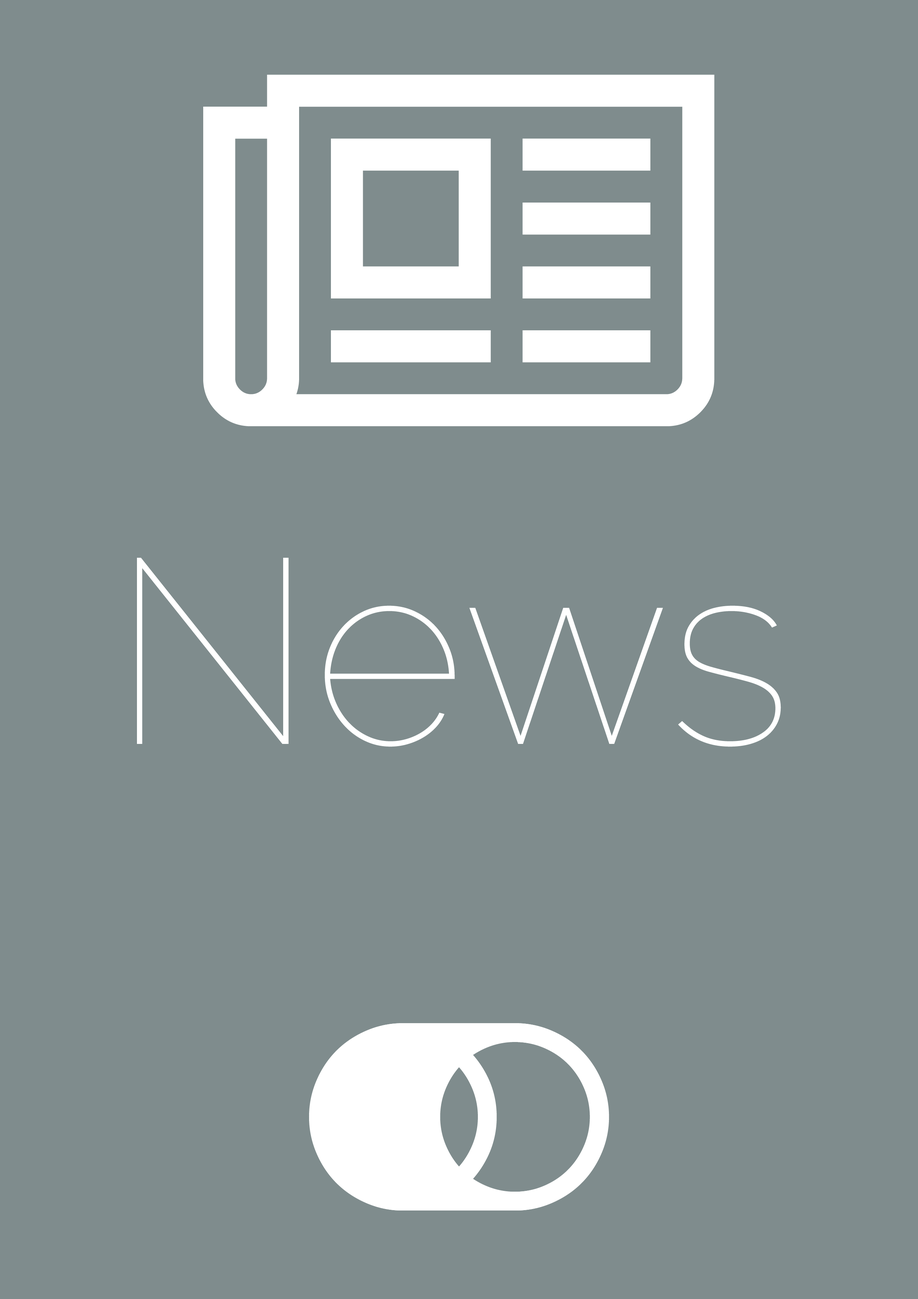
<style>
.page{position:relative;width:918px;height:1299px;background:#7f8c8d}
.page>*{position:absolute;margin:0}
.t1{font:262.2px "Raleway-Thin";color:#ffffff}
</style>
<div class="page">
<p class="t1" style="left:137px;top:558px;width:644px;height:189px">News</p>
</div>
